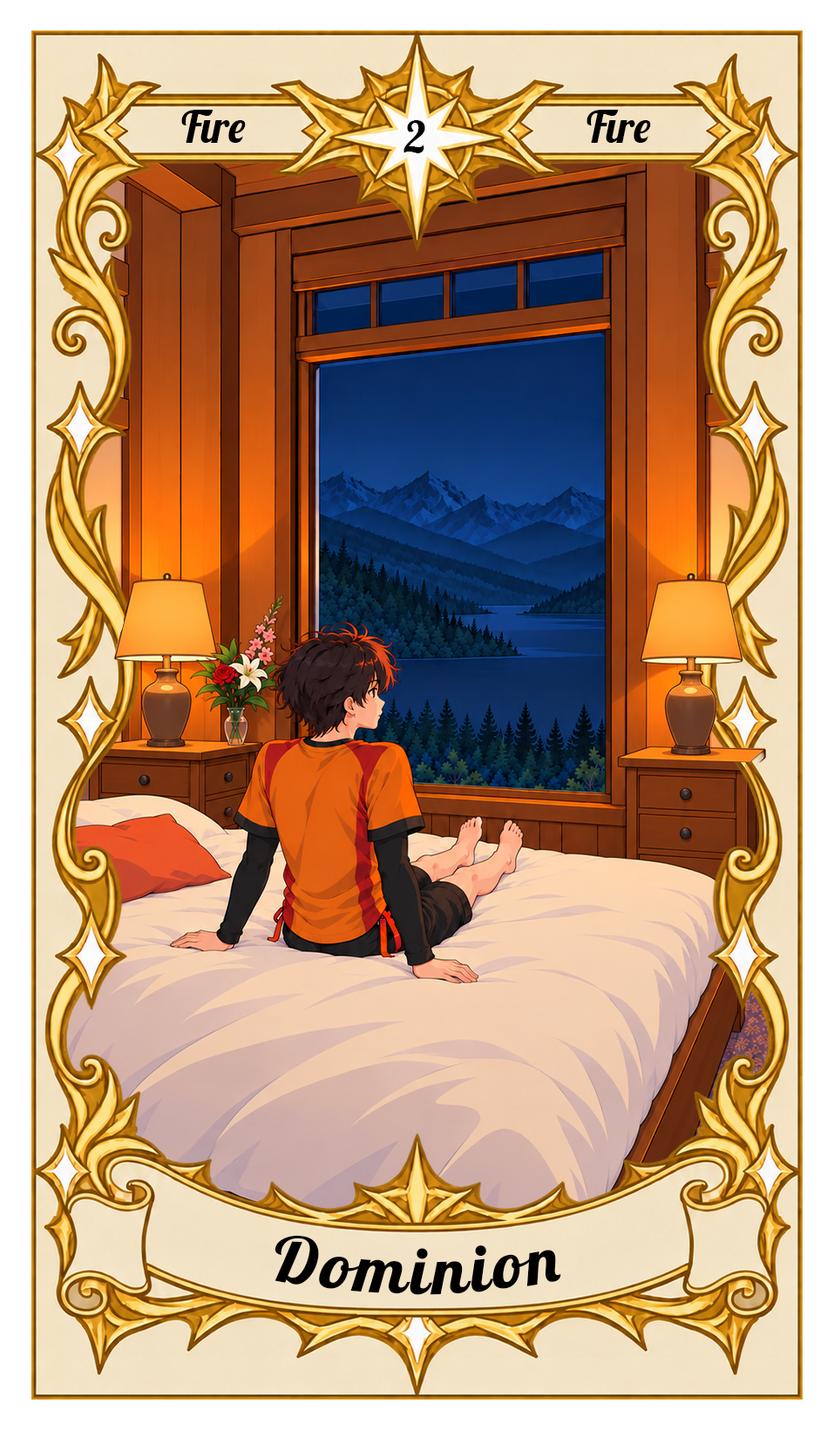
<style>
.page{position:relative;width:834px;height:1430px}
.page>*{position:absolute;margin:0}
.t1{font:43.6px "Lobster-Regular";color:#000000}
.t2{font:65.3px "Lobster-Regular";letter-spacing:0.05em;color:#000000}
</style>
<div class="page">
<p class="t1" style="left:181px;top:110px;width:65px;height:33px">Fire</p>
<p class="t1" style="left:586px;top:110px;width:65px;height:33px">Fire</p>
<p class="t1" style="left:403px;top:120px;width:22px;height:33px">2</p>
<p class="t2" style="left:274px;top:1235px;width:287px;height:60px">Dominion</p>
</div>
